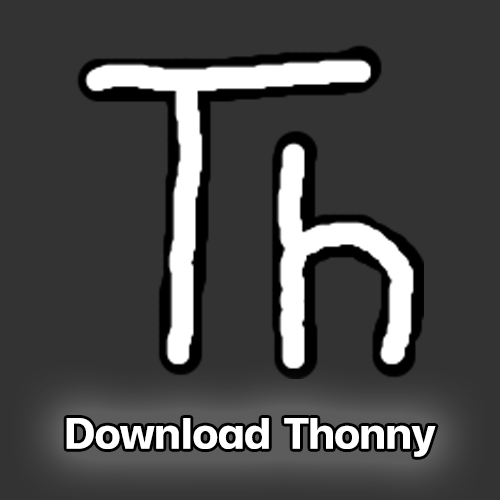
<style>
.page{position:relative;width:500px;height:500px;background:#333333}
.page>*{position:absolute;margin:0}
.t1{font:60px "FCMinimalBold";color:#ffffff}
</style>
<div class="page">
<p class="t1" style="left:66px;top:418px;width:370px;height:39px">Download Thonny</p>
</div>
